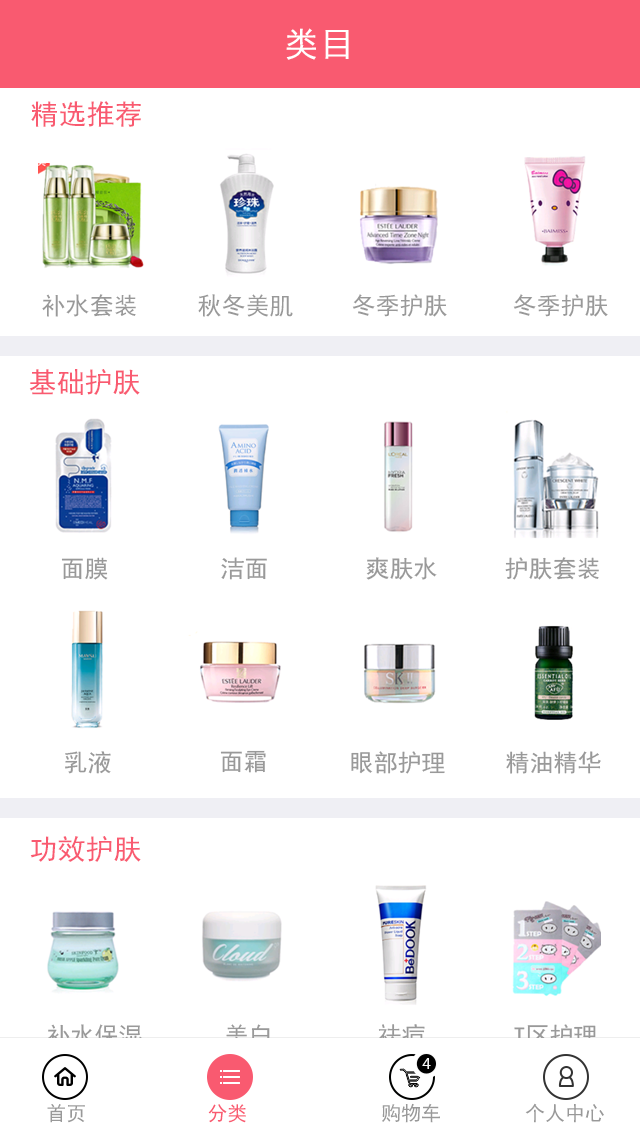
<style>
.page{position:relative;width:640px;height:1136px;background:#ffffff}
.page>*{position:absolute;margin:0}
.t1{font:34px "SimHei";letter-spacing:0.06em;color:#ffffff}
.t2{font:28px "SimHei";color:#f95a70}
.t3{font:24px "SimHei";color:#999999}
.t4{font:24px "SimHei"}
.t5{font:16.8px "MyriadPro-Regular";color:#f8f8f8}
.t6{font:20px "SimHei";color:#999999}
.t7{font:20px "SimHei";color:#f95a70}
</style>
<div class="page">
<p class="t1" style="left:286px;top:28px;width:63px;height:32px">类目</p>
<p class="t2" style="left:31px;top:101px;width:110px;height:26px">精选推荐</p>
<p class="t3" style="left:42px;top:294px;width:94px;height:23px">补水套装</p>
<p class="t3" style="left:198px;top:294px;width:95px;height:23px">秋冬美肌</p>
<p class="t3" style="left:352px;top:294px;width:95px;height:23px">冬季护肤</p>
<p class="t3" style="left:513px;top:294px;width:95px;height:23px">冬季护肤</p>
<p class="t2" style="left:29px;top:369px;width:111px;height:26px">基础护肤</p>
<p class="t3" style="left:61px;top:557px;width:47px;height:23px">面膜</p>
<p class="t3" style="left:221px;top:557px;width:46px;height:23px">洁面</p>
<p class="t3" style="left:366px;top:557px;width:71px;height:23px">爽肤水</p>
<p class="t3" style="left:505px;top:557px;width:94px;height:23px">护肤套装</p>
<p class="t3" style="left:220px;top:750px;width:46px;height:23px">面霜</p>
<p class="t3" style="left:65px;top:751px;width:46px;height:23px">乳液</p>
<p class="t3" style="left:351px;top:751px;width:94px;height:23px">眼部护理</p>
<p class="t3" style="left:506px;top:751px;width:95px;height:23px">精油精华</p>
<p class="t2" style="left:30px;top:836px;width:111px;height:26px">功效护肤</p>
<p class="t3" style="left:47px;top:1024px;width:95px;height:23px">补水保湿</p>
<p class="t4" style="left:226px;top:1024px;width:44px;height:23px">美白</p>
<p class="t3" style="left:378px;top:1024px;width:47px;height:23px">祛痘</p>
<p class="t3" style="left:514px;top:1024px;width:83px;height:23px">T区护理</p>
<p class="t5" style="left:422px;top:1058px;width:9px;height:11px">4</p>
<p class="t6" style="left:47px;top:1104px;width:38px;height:19px">首页</p>
<p class="t7" style="left:208px;top:1104px;width:38px;height:19px">分类</p>
<p class="t6" style="left:382px;top:1103px;width:58px;height:20px">购物车</p>
<p class="t6" style="left:525px;top:1103px;width:79px;height:20px">个人中心</p>
</div>
